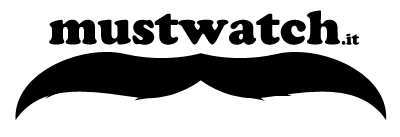
<style>
.page{position:relative;width:400px;height:137px;background:#ffffff}
.page>*{position:absolute;margin:0}
.t1{font:47.8px "CooperBlackStd";color:#000000}
.t2{font:15.4px "CooperBlackStd";color:#000000}
</style>
<div class="page">
<p class="t1" style="left:49px;top:10px;width:291px;height:35px">mustwatch</p>
<p class="t2" style="left:341px;top:33px;width:18px;height:12px">.it</p>
</div>
